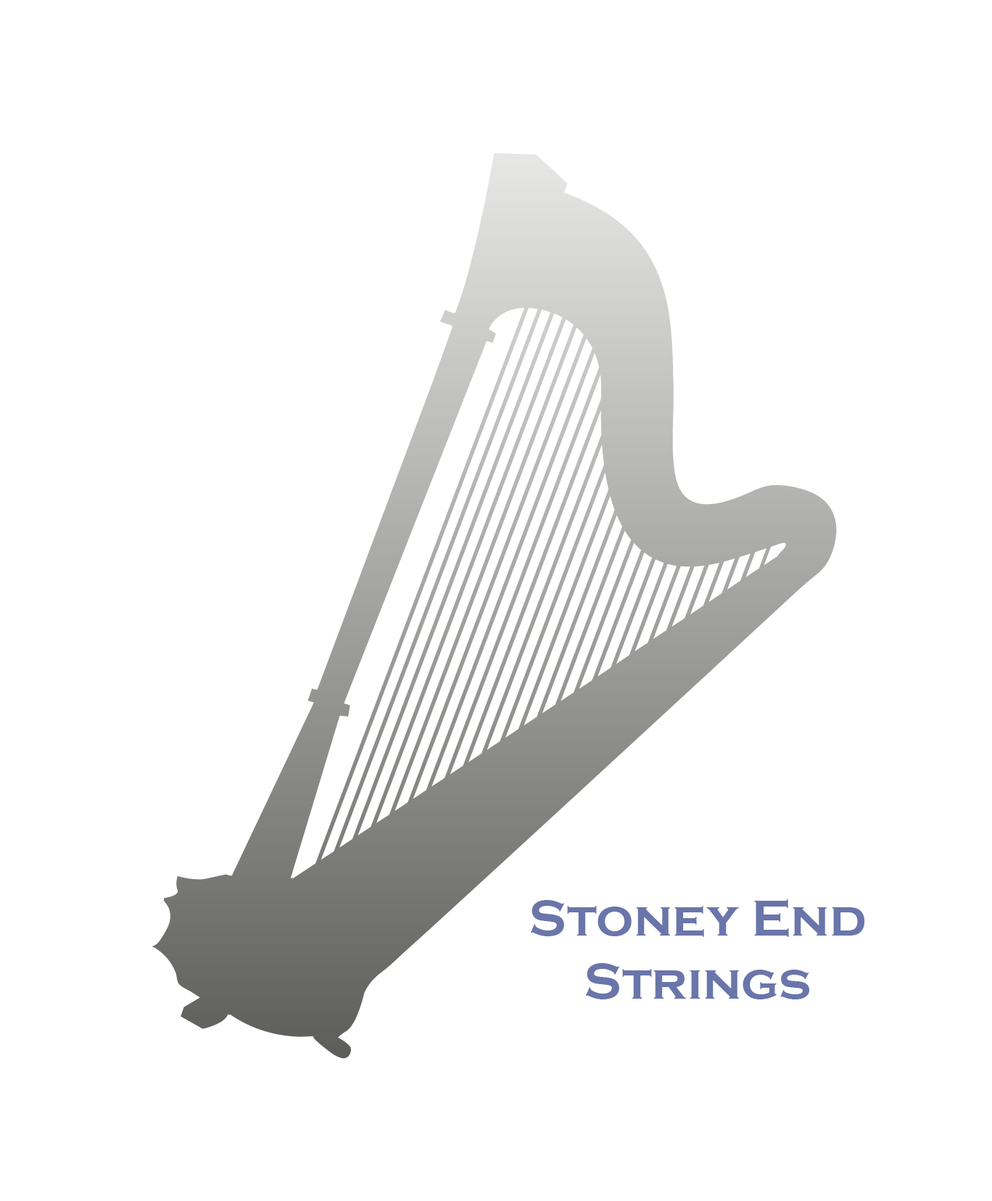
<style>
.page{position:relative;width:992px;height:1201px;background:#ffffff}
.page>*{position:absolute;margin:0}
.t1{font:52.2px "CopperplateGothic-Bold";color:#6a75aa}
</style>
<div class="page">
<p class="t1" style="left:531px;top:900px;width:335px;height:100px;text-align:center">Stoney End<br>Strings</p>
</div>
